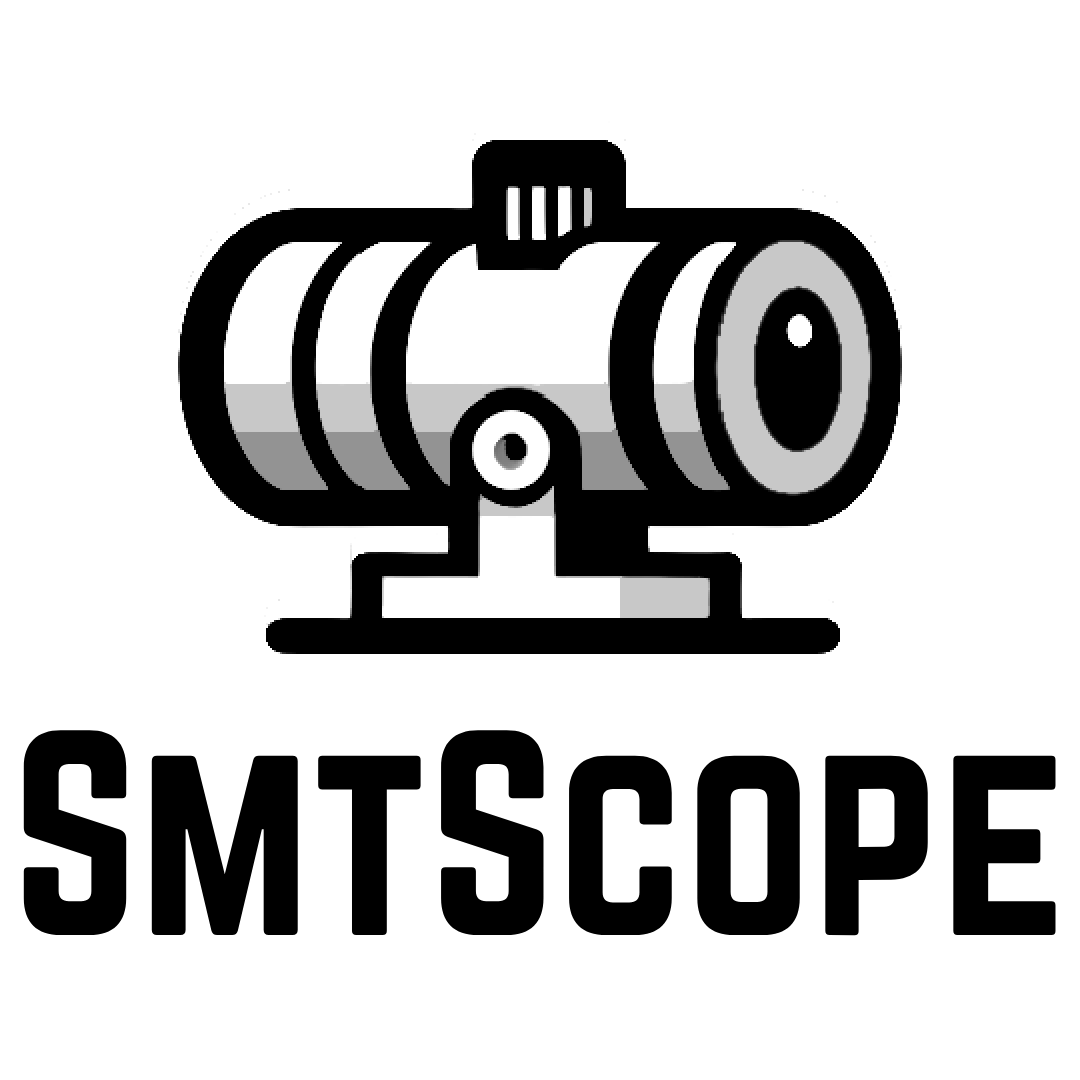
<style>
.page{position:relative;width:1080px;height:1080px;background:#ffffff}
.page>*{position:absolute;margin:0}
.t1{font:256px "Norwester-Regular";color:#000000}
</style>
<div class="page">
<p class="t1" style="left:23px;top:730px;width:1033px;height:206px">SmtScope</p>
</div>
